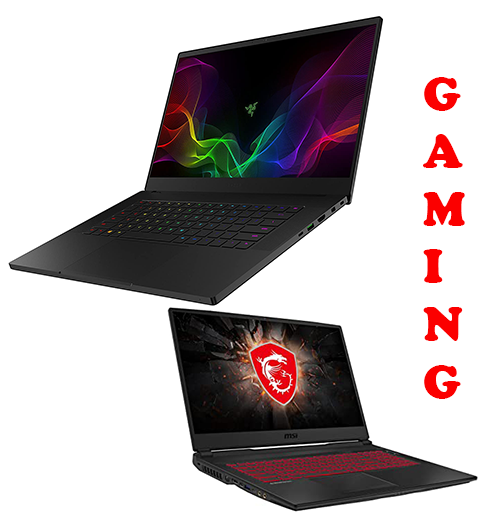
<style>
.page{position:relative;width:499px;height:526px;background:#ffffff}
.page>*{position:absolute;margin:0}
.t1{font:48px "CooperBlack";color:#fb0000}
</style>
<div class="page">
<p class="t1" style="left:423px;top:77px;width:42px;height:322px">G<br>A<br>M<br>I<br>N<br>G</p>
</div>
